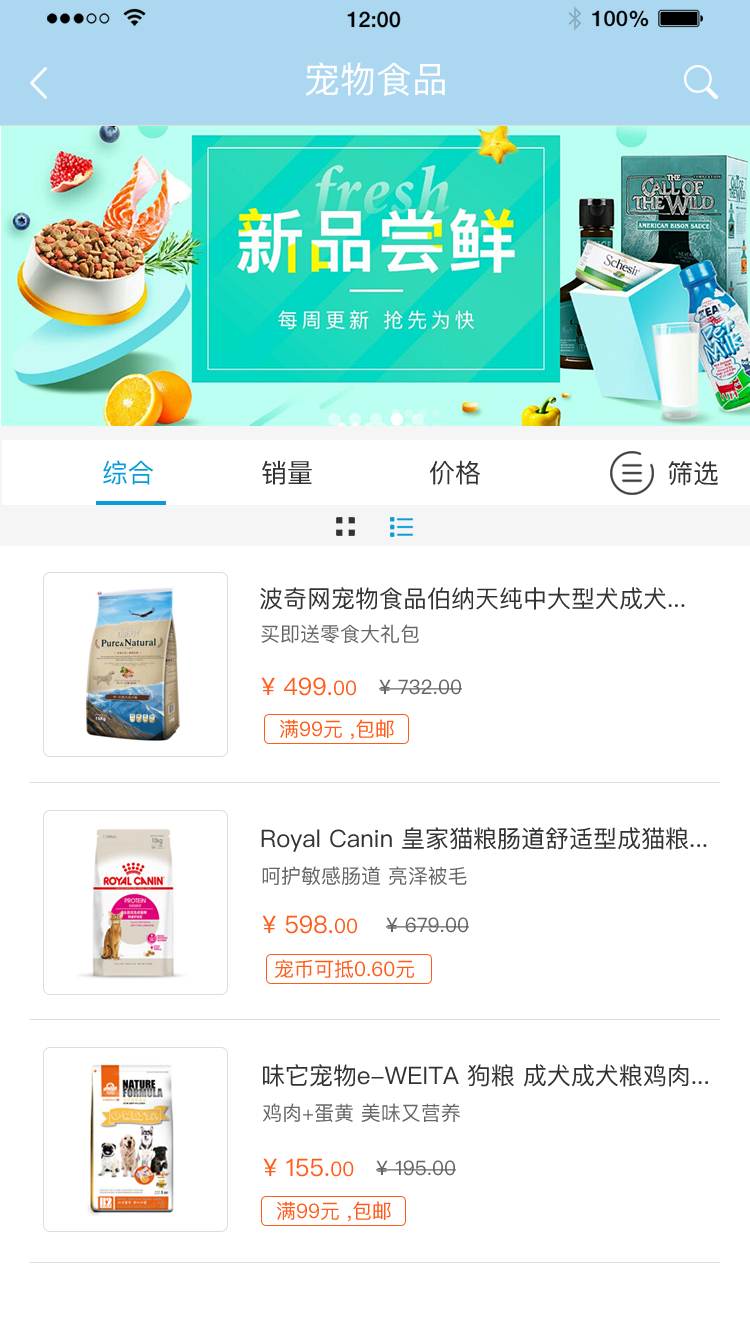
<style>
.page{position:relative;width:750px;height:1334px;background:#ffffff}
.page>*{position:absolute;margin:0}
.t1{font:36px "PingFangSC";color:#fefefe}
.t2{font:26px "PingFangSC";color:#0a9cda}
.t3{font:26px "PingFangSC";color:#333333}
.t4{font:26px "PingFangSC-Regular";color:#333333}
.t5{font:24px "PingFangSC";color:#333333}
.t6{font:20px "PingFangSC";color:#666666}
.t7{font:24px "PingFangSC";color:#ff5c1c}
.t8{font:20px "PingFangSC";color:#ff5c1c}
</style>
<div class="page">
<p class="t1" style="left:305px;top:62px;width:140px;height:34px">宠物食品</p>
<p class="t2" style="left:103px;top:460px;width:50px;height:25px">综合</p>
<p class="t3" style="left:262px;top:460px;width:50px;height:25px">销量</p>
<p class="t3" style="left:430px;top:460px;width:50px;height:25px">价格</p>
<p class="t4" style="left:668px;top:461px;width:50px;height:25px">筛选</p>
<p class="t5" style="left:260px;top:587px;width:425px;height:23px">波奇网宠物食品伯纳天纯中大型犬成犬...</p>
<p class="t6" style="left:261px;top:624px;width:158px;height:20px">买即送零食大礼包</p>
<p class="t7" style="left:261px;top:677px;width:95px;height:19px">¥ 499.<span class="t8">00</span></p>
<p class="t6" style="left:379px;top:679px;width:83px;height:16px">¥ 732.00</p>
<p class="t8" style="left:280px;top:719px;width:114px;height:21px">满99元 ,包邮</p>
<p class="t5" style="left:261px;top:827px;width:446px;height:25px">Royal Canin 皇家猫粮肠道舒适型成猫粮...</p>
<p class="t6" style="left:262px;top:866px;width:205px;height:19px">呵护敏感肠道 亮泽被毛</p>
<p class="t7" style="left:262px;top:915px;width:95px;height:19px">¥ 598.<span class="t8">00</span></p>
<p class="t6" style="left:386px;top:917px;width:83px;height:16px">¥ 679.00</p>
<p class="t8" style="left:275px;top:959px;width:139px;height:19px">宠币可抵0.60元</p>
<p class="t5" style="left:263px;top:1064px;width:446px;height:23px">味它宠物e-WEITA 狗粮 成犬成犬粮鸡肉...</p>
<p class="t6" style="left:263px;top:1103px;width:197px;height:20px">鸡肉+蛋黄 美味又营养</p>
<p class="t7" style="left:263px;top:1158px;width:91px;height:19px">¥ 155.<span class="t8">00</span></p>
<p class="t6" style="left:376px;top:1160px;width:80px;height:16px">¥ 195.00</p>
<p class="t8" style="left:277px;top:1201px;width:114px;height:21px">满99元 ,包邮</p>
</div>
